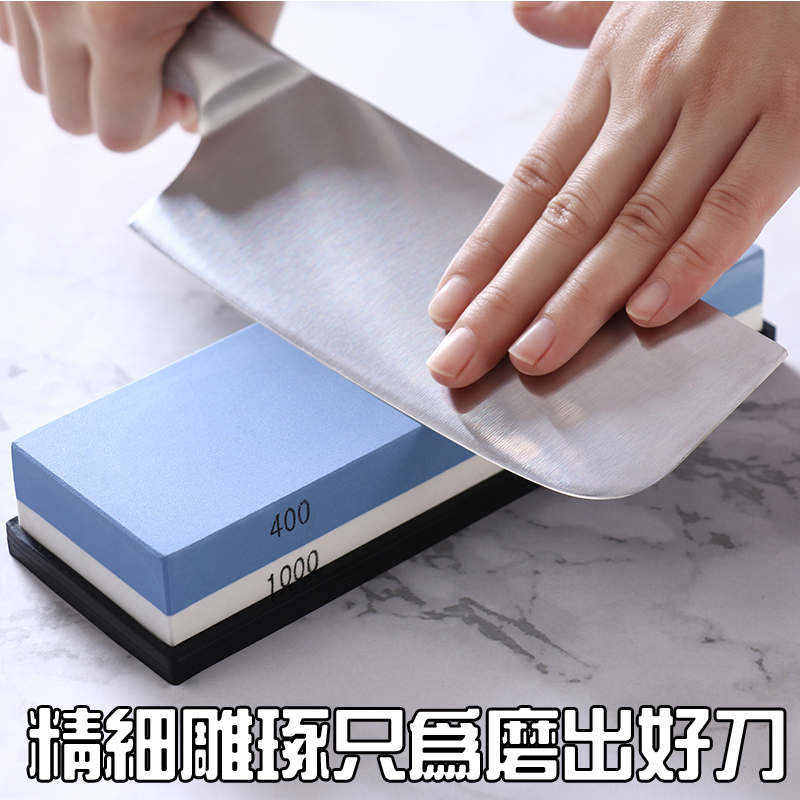
<style>
.page{position:relative;width:800px;height:800px}
.page>*{position:absolute;margin:0}
.t1{font:76.1px "HanWangZonYi";color:#ffffff}
</style>
<div class="page">
<p class="t1" style="left:29px;top:708px;width:755px;height:72px">精細雕琢只為磨出好刀</p>
</div>
